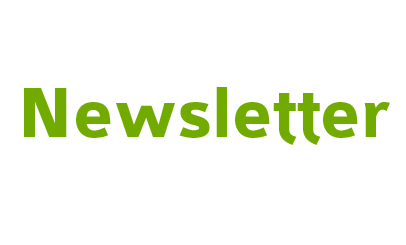
<style>
.page{position:relative;width:406px;height:245px;background:#ffffff}
.page>*{position:absolute;margin:0}
.t1{font:75px "Colaborate-Bold";color:#72ab00}
</style>
<div class="page">
<p class="t1" style="left:24px;top:87px;width:366px;height:58px">Newsletter</p>
</div>
